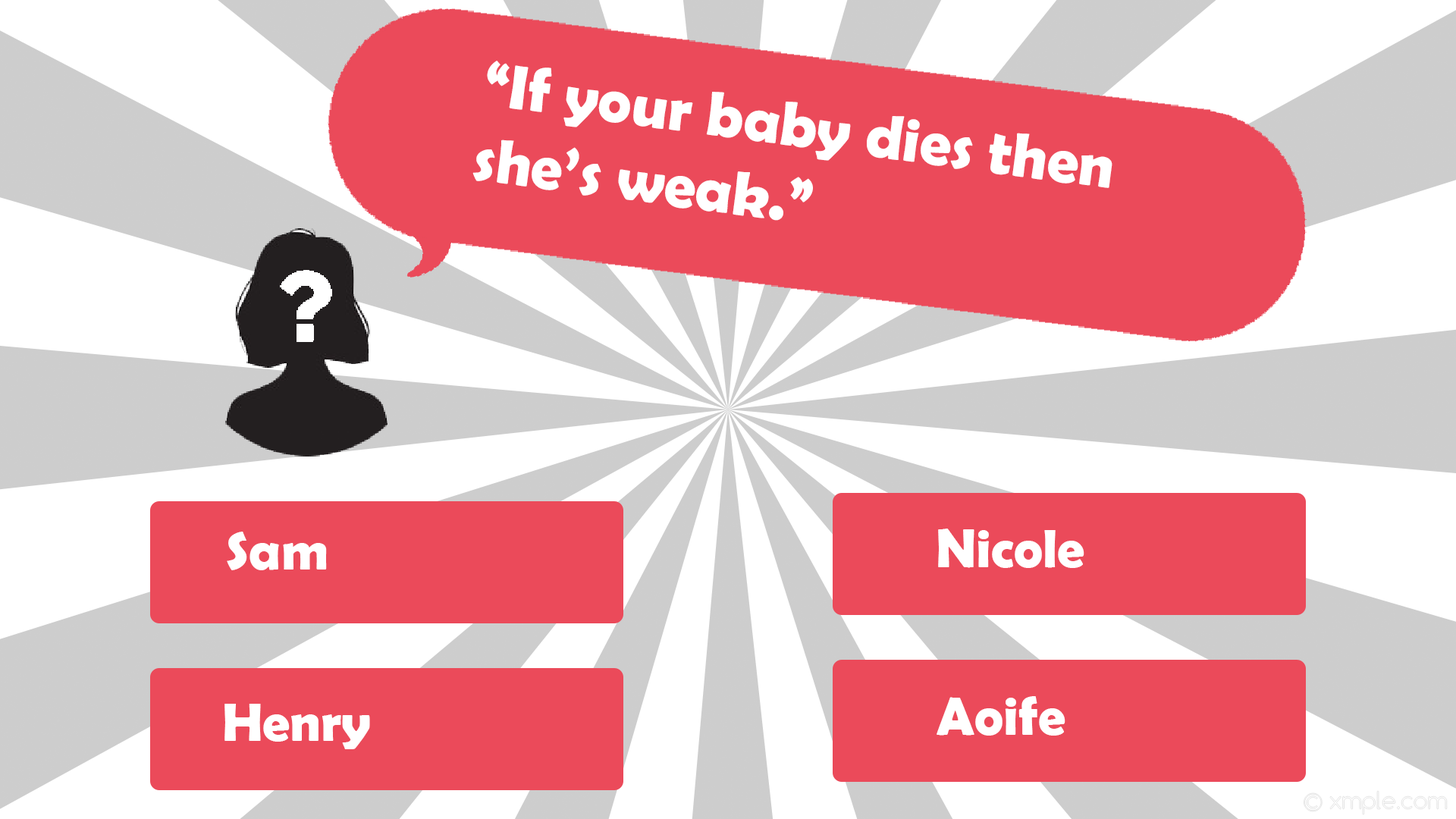
<style>
.page{position:relative;width:1456px;height:819px;background:#eb4a5a}
.page>*{position:absolute;margin:0}
.t1{font:62.7px "BerlinSansFBDemi-Bold";color:#ffffff}
.t2{font:54.6px "BerlinSansFBDemi-Bold";color:#ffffff}
</style>
<div class="page">
<p class="t1" style="left:472px;top:61px;width:640px;height:160px;rotate:8deg">“If your baby dies then<br>she’s weak.”</p>
<p class="t2" style="left:227px;top:532px;width:100px;height:38px">Sam</p>
<p class="t2" style="left:938px;top:529px;width:146px;height:39px">Nicole</p>
<p class="t2" style="left:937px;top:696px;width:128px;height:40px">Aoife</p>
<p class="t2" style="left:224px;top:704px;width:146px;height:45px">Henry</p>
</div>
